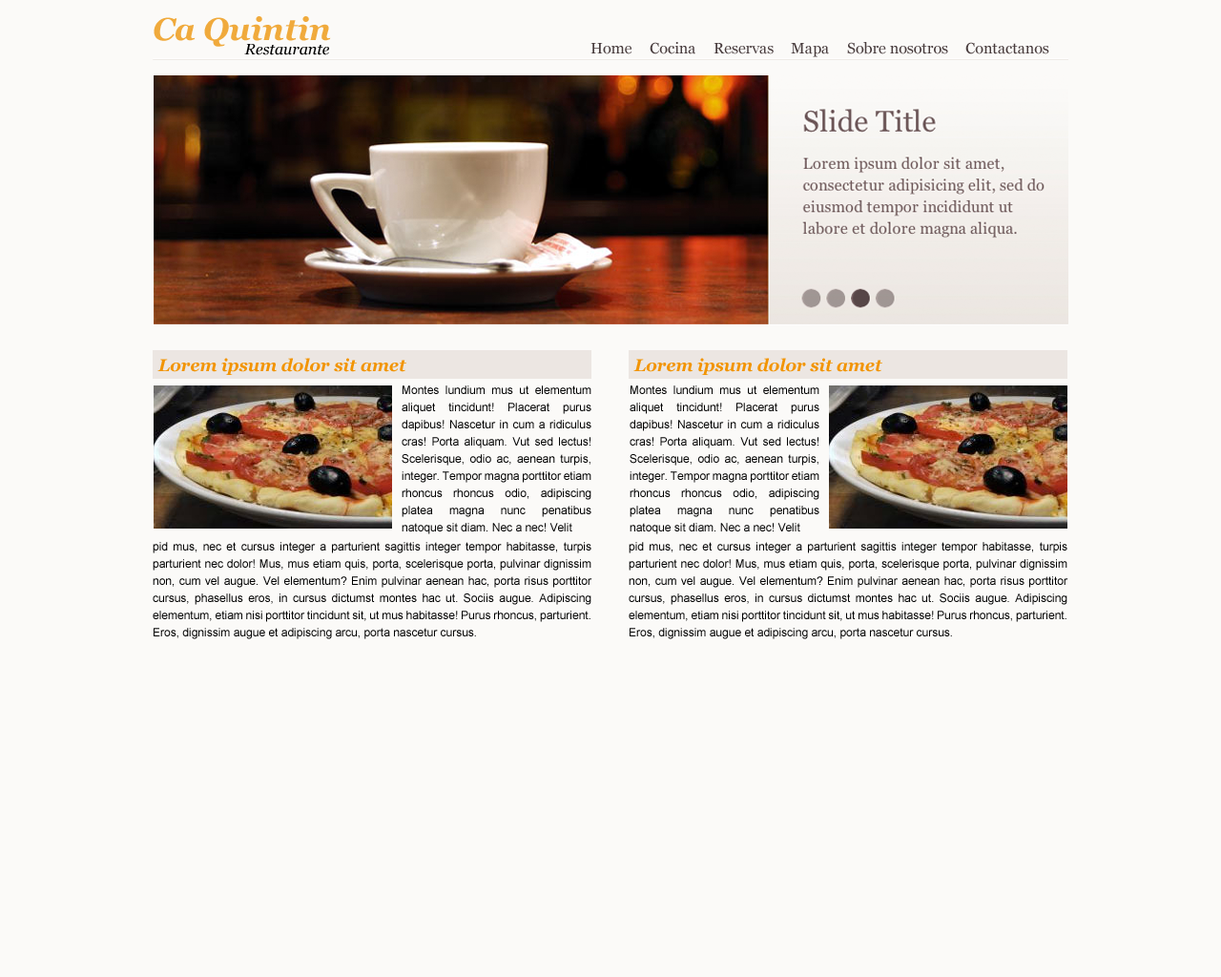
<style>
.page{position:relative;width:1221px;height:977px;background:#fbfaf8}
.page>*{position:absolute;margin:0}
.t1{font:31.5px "Georgia-BoldItalic";color:#f0aa3c}
.t2{font:15.3px "Georgia";color:#493d3e}
.t3{font:15.3px "Georgia-Italic";color:#000000}
.t4{font:17.2px "Georgia-BoldItalic";color:#f29400}
.t5{font:11.4px/17.2px "ArialMT";color:#000000}
</style>
<div class="page">
<p class="t1" style="left:154px;top:16px;width:177px;height:31px">Ca Quintin</p>
<p class="t2" style="left:650px;top:42px;width:45px;height:12px">Cocina</p>
<p class="t2" style="left:847px;top:42px;width:101px;height:12px">Sobre nosotros</p>
<p class="t2" style="left:965px;top:42px;width:84px;height:12px">Contactanos</p>
<p class="t3" style="left:244px;top:44px;width:85px;height:11px">Restaurante</p>
<p class="t2" style="left:590px;top:43px;width:42px;height:11px">Home</p>
<p class="t2" style="left:713px;top:43px;width:61px;height:11px">Reservas</p>
<p class="t2" style="left:791px;top:43px;width:38px;height:14px">Mapa</p>
<p class="t4" style="left:157px;top:358px;width:249px;height:17px">Lorem ipsum dolor sit amet</p>
<p class="t4" style="left:633px;top:358px;width:249px;height:17px">Lorem ipsum dolor sit amet</p>
<p class="t5" style="left:402px;top:385px;width:189px;height:149px;text-align:justify">Montes lundium mus ut elementum aliquet tincidunt! Placerat purus dapibus! Nascetur in cum a ridiculus cras! Porta aliquam. Vut sed lectus! Scelerisque, odio ac, aenean turpis, integer. Tempor magna porttitor etiam rhoncus rhoncus odio, adipiscing platea magna nunc penatibus natoque sit diam. Nec a nec! Velit</p>
<p class="t5" style="left:630px;top:385px;width:189px;height:149px;text-align:justify">Montes lundium mus ut elementum aliquet tincidunt! Placerat purus dapibus! Nascetur in cum a ridiculus cras! Porta aliquam. Vut sed lectus! Scelerisque, odio ac, aenean turpis, integer. Tempor magna porttitor etiam rhoncus rhoncus odio, adipiscing platea magna nunc penatibus natoque sit diam. Nec a nec! Velit</p>
<p class="t5" style="left:153px;top:542px;width:439px;height:97px;text-align:justify">pid mus, nec et cursus integer a parturient sagittis integer tempor habitasse, turpis parturient nec dolor! Mus, mus etiam quis, porta, scelerisque porta, pulvinar dignissim non, cum vel augue. Vel elementum? Enim pulvinar aenean hac, porta risus porttitor cursus, phasellus eros, in cursus dictumst montes hac ut. Sociis augue. Adipiscing elementum, etiam nisi porttitor tincidunt sit, ut mus habitasse! Purus rhoncus, parturient. Eros, dignissim augue et adipiscing arcu, porta nascetur cursus.</p>
<p class="t5" style="left:629px;top:542px;width:439px;height:97px;text-align:justify">pid mus, nec et cursus integer a parturient sagittis integer tempor habitasse, turpis parturient nec dolor! Mus, mus etiam quis, porta, scelerisque porta, pulvinar dignissim non, cum vel augue. Vel elementum? Enim pulvinar aenean hac, porta risus porttitor cursus, phasellus eros, in cursus dictumst montes hac ut. Sociis augue. Adipiscing elementum, etiam nisi porttitor tincidunt sit, ut mus habitasse! Purus rhoncus, parturient. Eros, dignissim augue et adipiscing arcu, porta nascetur cursus.</p>
</div>
